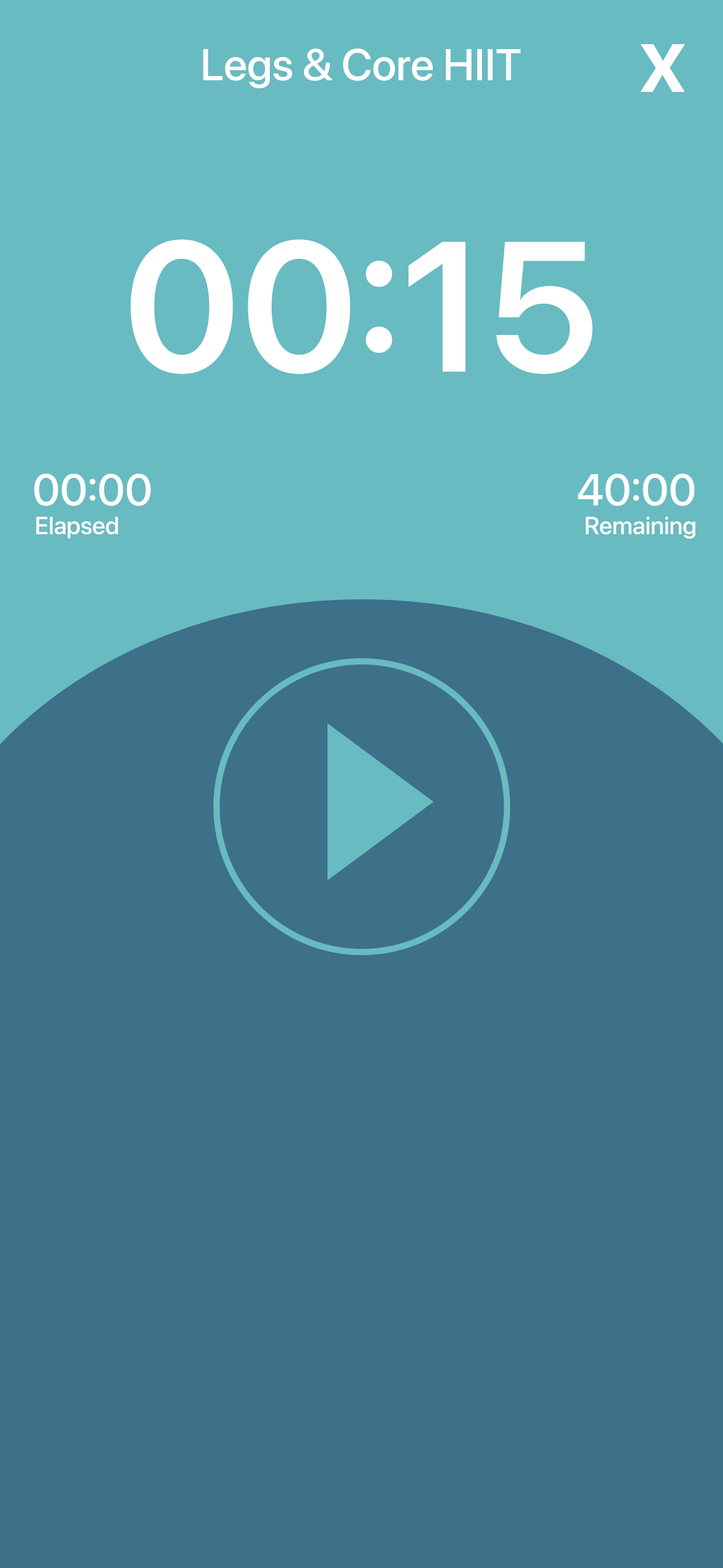
<style>
.page{position:relative;width:723px;height:1568px;background:#3d7089}
.page>*{position:absolute;margin:0}
.t1{font:44.2px "SFPro-Medium";color:#ffffff}
.t2{font:92px "SFPro-Semibold";color:#ffffff}
.t3{font:184px "SFPro-Semibold";color:#ffffff}
.t4{font:24.5px "SFPro-Medium";color:#ffffff}
</style>
<div class="page">
<p class="t1" style="left:203px;top:48px;width:318px;height:40px">Legs &amp; Core HIIT</p>
<p class="t2" style="left:640px;top:44px;width:45px;height:48px">x</p>
<p class="t3" style="left:131px;top:239px;width:462px;height:135px">00:15</p>
<p class="t1" style="left:34px;top:474px;width:117px;height:32px">00:00</p>
<p class="t1" style="left:578px;top:474px;width:117px;height:32px">40:00</p>
<p class="t4" style="left:36px;top:517px;width:82px;height:22px">Elapsed</p>
<p class="t4" style="left:586px;top:517px;width:110px;height:22px">Remaining</p>
</div>
